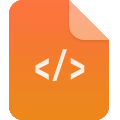
<style>
.page{position:relative;width:120px;height:120px;background:#ffffff}
.page>*{position:absolute;margin:0}
.t1{font:42px "DoppioOne-Regular";letter-spacing:0.05em;color:#fdeee3;scale:0.8 1}
</style>
<div class="page">
<p class="t1" style="left:35px;top:49px;width:50px;height:32px">&lt;/&gt;</p>
</div>
